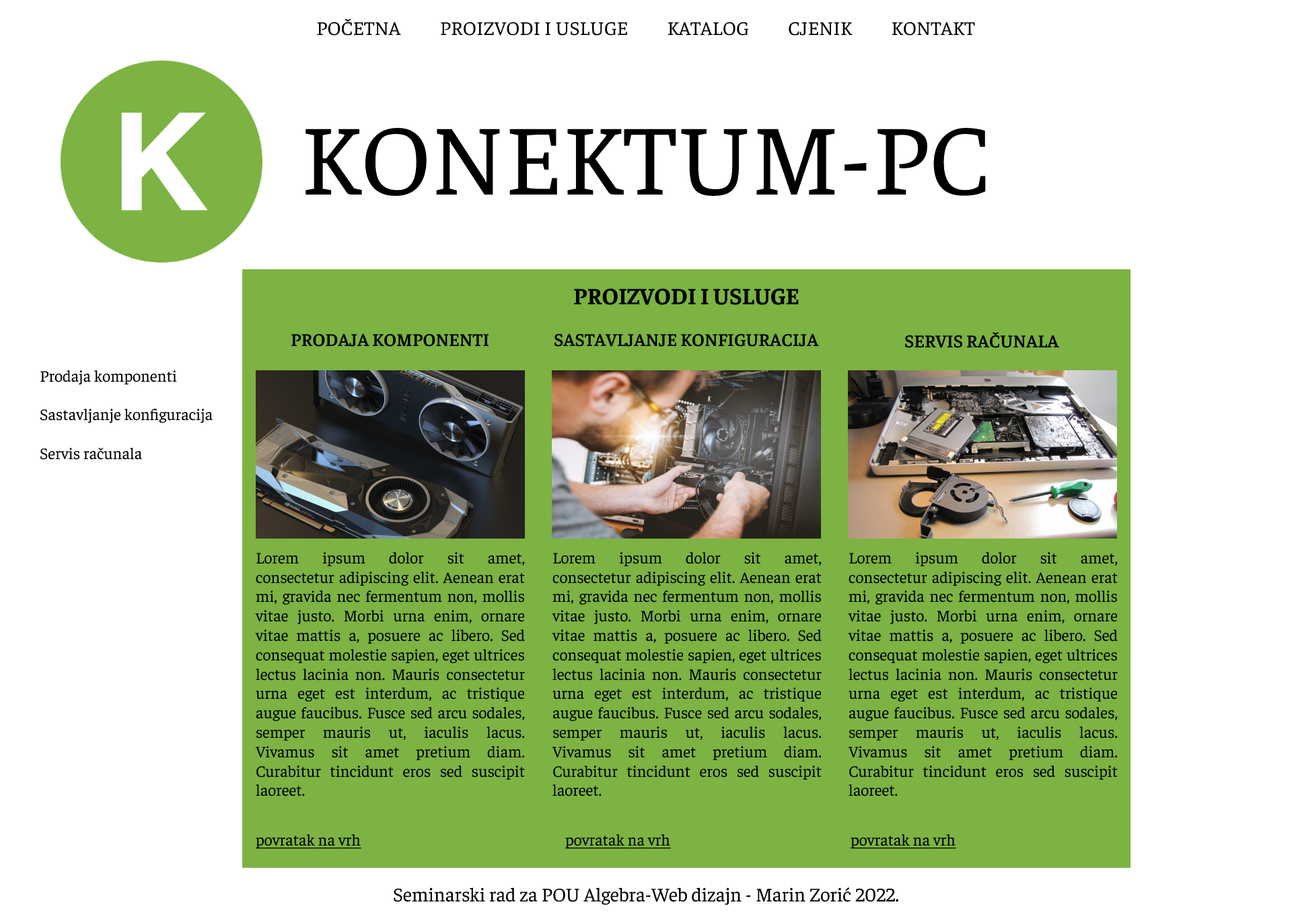
<style>
.page{position:relative;width:1292px;height:923px;background:#ffffff}
.page>*{position:absolute;margin:0}
.t1{font:19.5px "Faustina-Regular";color:#000000}
.t2{font:101px "Faustina-Regular";color:#000000}
.t3{font:23.6px "Faustina-Bold";color:#000000}
.t4{font:18.2px "Faustina-SemiBold";color:#000000}
.t5{font:16.2px "Faustina-Regular";color:#000000}
.t6{font:16.2px "Faustina-Regular";color:#000000;text-decoration:underline}
</style>
<div class="page">
<p class="t1" style="left:317px;top:18px;width:658px;height:18px">POČETNA          PROIZVODI I USLUGE          KATALOG          CJENIK          KONTAKT</p>
<p class="t2" style="left:306px;top:128px;width:680px;height:68px">KONEKTUM-PC</p>
<p class="t3" style="left:574px;top:288px;width:225px;height:17px">PROIZVODI I USLUGE</p>
<p class="t4" style="left:291px;top:334px;width:198px;height:13px">PRODAJA KOMPONENTI</p>
<p class="t4" style="left:555px;top:334px;width:264px;height:13px">SASTAVLJANJE KONFIGURACIJA</p>
<p class="t4" style="left:905px;top:332px;width:154px;height:16px">SERVIS RAČUNALA</p>
<p class="t5" style="left:40px;top:370px;width:173px;height:90px">Prodaja komponenti<br><br>Sastavljanje konfiguracija<br><br>Servis računala</p>
<p class="t5" style="left:255px;top:552px;width:270px;height:244px;text-align:justify">Lorem ipsum dolor sit amet, consectetur adipiscing elit. Aenean erat mi, gravida nec fermentum non, mollis vitae justo. Morbi urna enim, ornare vitae mattis a, posuere ac libero. Sed consequat molestie sapien, eget ultrices lectus lacinia non. Mauris consectetur urna eget est interdum, ac tristique augue faucibus. Fusce sed arcu sodales, semper mauris ut, iaculis lacus. Vivamus sit amet pretium diam. Curabitur tincidunt eros sed suscipit laoreet.</p>
<p class="t5" style="left:552px;top:552px;width:270px;height:244px;text-align:justify">Lorem ipsum dolor sit amet, consectetur adipiscing elit. Aenean erat mi, gravida nec fermentum non, mollis vitae justo. Morbi urna enim, ornare vitae mattis a, posuere ac libero. Sed consequat molestie sapien, eget ultrices lectus lacinia non. Mauris consectetur urna eget est interdum, ac tristique augue faucibus. Fusce sed arcu sodales, semper mauris ut, iaculis lacus. Vivamus sit amet pretium diam. Curabitur tincidunt eros sed suscipit laoreet.</p>
<p class="t5" style="left:848px;top:552px;width:270px;height:244px;text-align:justify">Lorem ipsum dolor sit amet, consectetur adipiscing elit. Aenean erat mi, gravida nec fermentum non, mollis vitae justo. Morbi urna enim, ornare vitae mattis a, posuere ac libero. Sed consequat molestie sapien, eget ultrices lectus lacinia non. Mauris consectetur urna eget est interdum, ac tristique augue faucibus. Fusce sed arcu sodales, semper mauris ut, iaculis lacus. Vivamus sit amet pretium diam. Curabitur tincidunt eros sed suscipit laoreet.</p>
<p class="t6" style="left:256px;top:834px;width:105px;height:15px">povratak na vrh</p>
<p class="t6" style="left:565px;top:834px;width:106px;height:15px">povratak na vrh</p>
<p class="t6" style="left:851px;top:834px;width:105px;height:15px">povratak na vrh</p>
<p class="t1" style="left:394px;top:887px;width:505px;height:18px">Seminarski rad za POU Algebra-Web dizajn - Marin Zorić 2022.</p>
</div>
